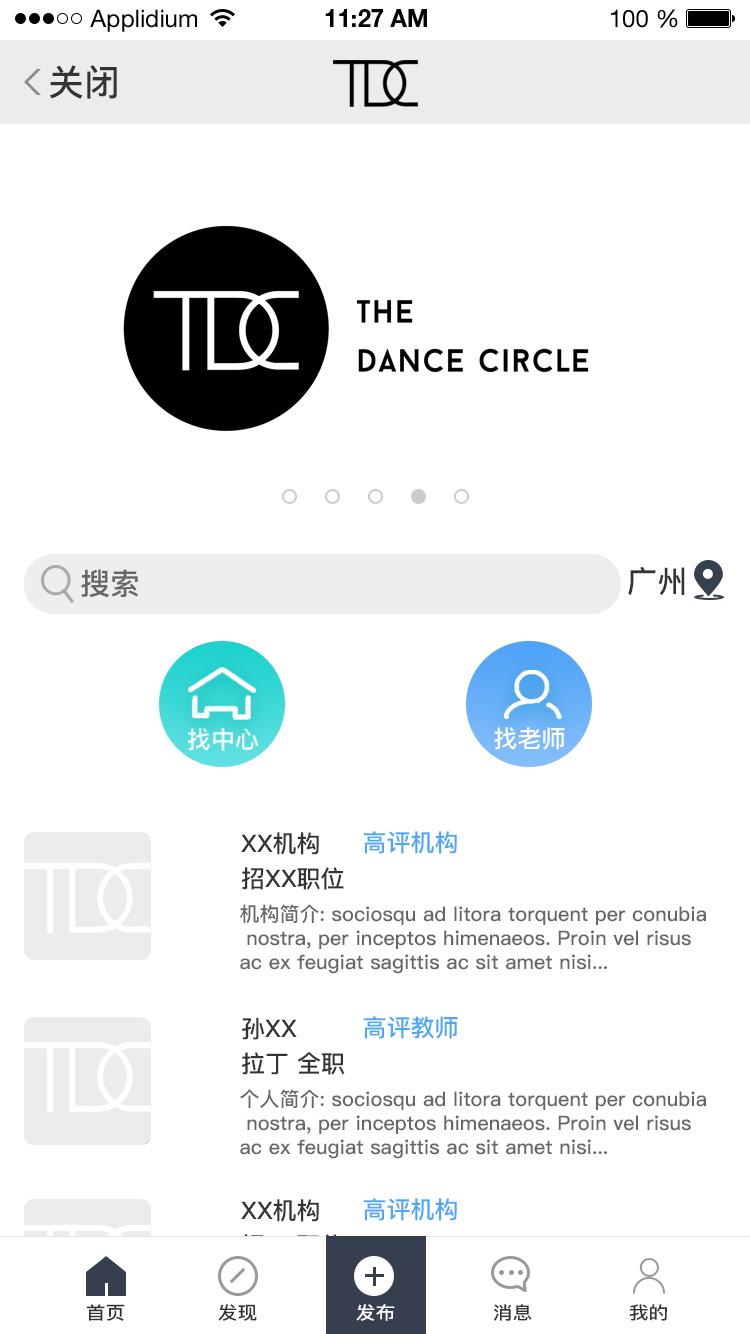
<style>
.page{position:relative;width:750px;height:1334px;background:#ffffff}
.page>*{position:absolute;margin:0}
.t1{font:24px "HelveticaNeueLTStd-Roman";color:#000000}
.t2{font:24px "HelveticaNeueLTStd-Bd";color:#000000}
.t3{font:36px "PingFang-SC-Bold";color:#333333}
.t4{font:30px "PingFang-SC-Bold";color:#666666}
.t5{font:30px "PingFang-SC-Bold";color:#333333}
.t6{font:24px "PingFang-SC-Bold";color:#ffffff}
.t7{font:24px "PingFang-SC-Bold";color:#333333}
.t8{font:24px "PingFang-SC-Bold";color:#4da6ff}
.t9{font:20px "PingFang-SC-Bold";color:#666666}
.t10{font:18px "PingFang-SC-Bold";color:#333333;scale:1.1 1}
.t11{font:18px "PingFang-SC-Bold";color:#ffffff;scale:1.1 1}
</style>
<div class="page">
<p class="t1" style="left:90px;top:9px;width:107px;height:23px">Applidium</p>
<p class="t2" style="left:325px;top:9px;width:102px;height:18px">11:27 AM</p>
<p class="t1" style="left:611px;top:9px;width:67px;height:19px">100 %</p>
<p class="t3" style="left:50px;top:65px;width:67px;height:34px">关闭</p>
<p class="t4" style="left:81px;top:569px;width:57px;height:29px">搜索</p>
<p class="t5" style="left:628px;top:567px;width:57px;height:29px">广州</p>
<p class="t6" style="left:187px;top:728px;width:72px;height:23px">找中心</p>
<p class="t6" style="left:494px;top:727px;width:71px;height:23px">找老师</p>
<p class="t7" style="left:241px;top:832px;width:78px;height:23px">XX机构</p>
<p class="t8" style="left:363px;top:831px;width:94px;height:23px">高评机构</p>
<p class="t7" style="left:241px;top:867px;width:103px;height:23px">招XX职位</p>
<p class="t9" style="left:240px;top:904px;width:466px;height:70px">机构简介: sociosqu ad litora torquent per conubia<br> nostra, per inceptos himenaeos. Proin vel risus <br>ac ex feugiat sagittis ac sit amet nisi...</p>
<p class="t7" style="left:242px;top:1017px;width:55px;height:23px">孙XX</p>
<p class="t8" style="left:363px;top:1016px;width:95px;height:23px">高评教师</p>
<p class="t7" style="left:242px;top:1052px;width:103px;height:23px">拉丁 全职</p>
<p class="t9" style="left:240px;top:1089px;width:466px;height:70px">个人简介: sociosqu ad litora torquent per conubia<br> nostra, per inceptos himenaeos. Proin vel risus <br>ac ex feugiat sagittis ac sit amet nisi...</p>
<p class="t7" style="left:241px;top:1199px;width:78px;height:23px">XX机构</p>
<p class="t8" style="left:363px;top:1198px;width:94px;height:23px">高评机构</p>
<p class="t10" style="left:86px;top:1304px;width:39px;height:17px">首页</p>
<p class="t10" style="left:218px;top:1304px;width:39px;height:17px">发现</p>
<p class="t11" style="left:356px;top:1304px;width:39px;height:17px">发布</p>
<p class="t10" style="left:493px;top:1304px;width:39px;height:17px">消息</p>
<p class="t10" style="left:629px;top:1304px;width:38px;height:17px">我的</p>
</div>
